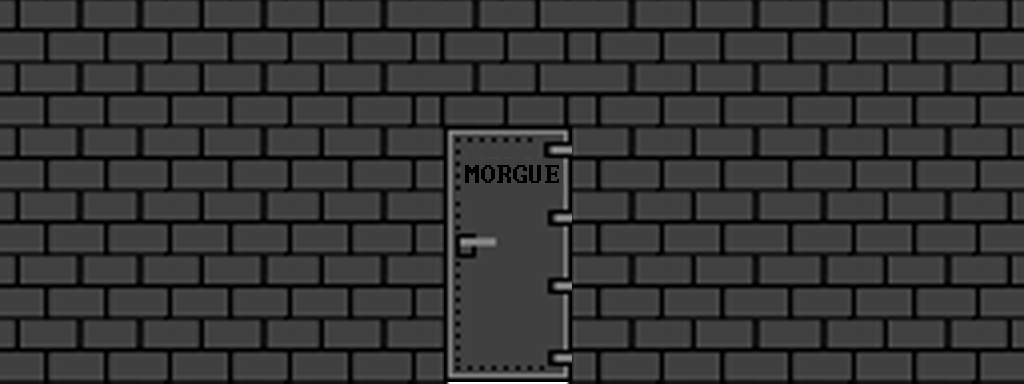
<style>
.page{position:relative;width:1024px;height:384px;background:#404040}
.page>*{position:absolute;margin:0}
.t1{font:24px "Terminal";color:#000000}
</style>
<div class="page">
<p class="t1" style="left:465px;top:165px;width:94px;height:18px">MORGUE</p>
</div>
